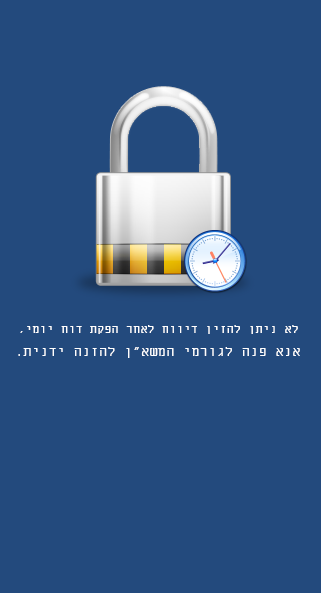
<style>
.page{position:relative;width:321px;height:593px;background:#234a7d}
.page>*{position:absolute;margin:0}
.t1{font:12px "MiriamFixed";color:#ffffff}
.t2{font:14px "MiriamFixed";color:#ffffff}
</style>
<div class="page">
<p class="t1" style="left:20px;top:325px;width:278px;height:9px">,ימוי חוד תקפה רחאל חוויד ןיזהל ןתינ אל</p>
<p class="t2" style="left:18px;top:347px;width:282px;height:11px">.תינדי הנזהל ן"אשמה ימרוגל הנפ אנא</p>
</div>
